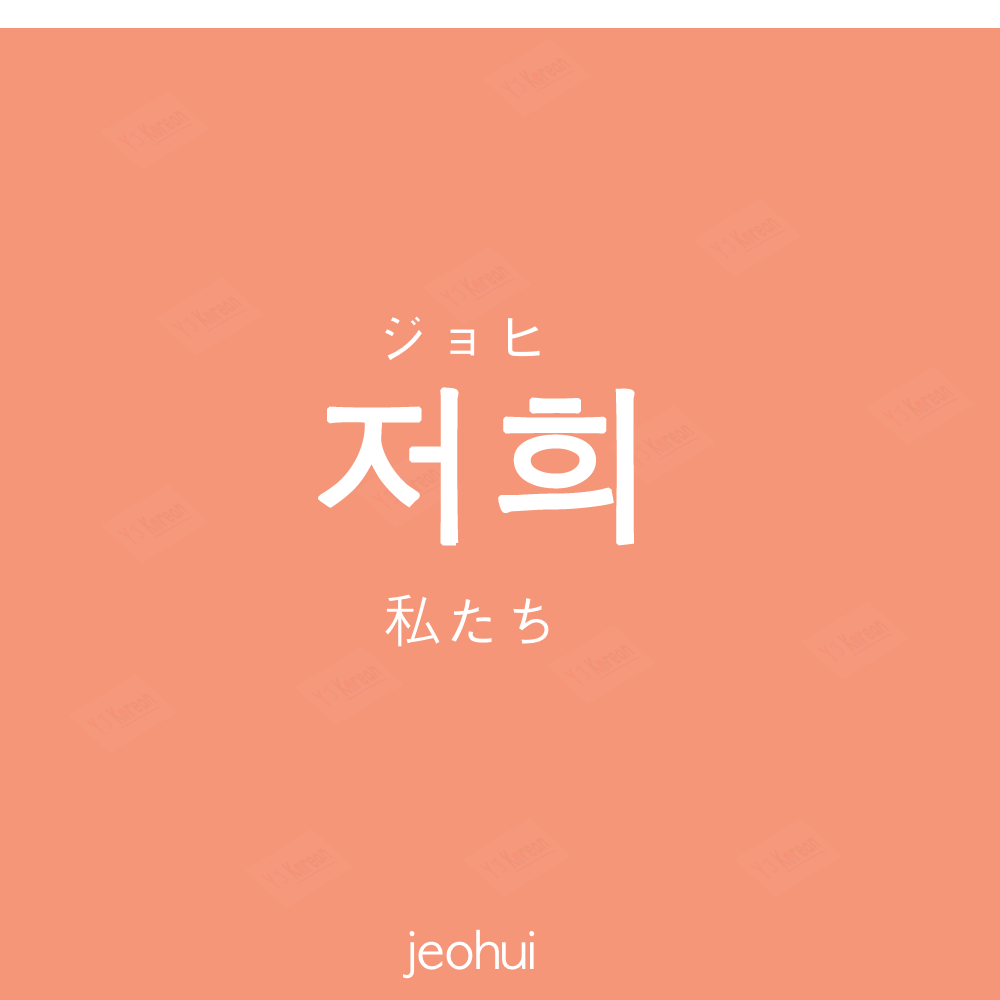
<style>
.page{position:relative;width:1000px;height:1000px;background:#f69679}
.page>*{position:absolute;margin:0}
.t1{font:60px "AppleGothic";color:#ffffff}
.t2{font:170px "AppleGothic";color:#ffffff;font-weight:bold}
.t3{font:50px "AppleGothic";color:#ffffff}
</style>
<div class="page">
<p class="t1" style="left:385px;top:316px;width:155px;height:44px">ジョヒ</p>
<p class="t2" style="left:318px;top:387px;width:317px;height:159px">저희</p>
<p class="t1" style="left:385px;top:594px;width:164px;height:53px">私たち</p>
<p class="t3" style="left:403px;top:929px;width:132px;height:50px">jeohui</p>
</div>
